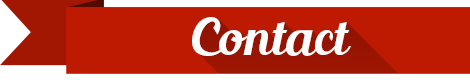
<style>
.page{position:relative;width:470px;height:80px;background:#bd1a01}
.page>*{position:absolute;margin:0}
.t1{font:50.6px "BlendaScript";color:#ffffff}
</style>
<div class="page">
<p class="t1" style="left:192px;top:17px;width:159px;height:39px">Contact</p>
</div>
